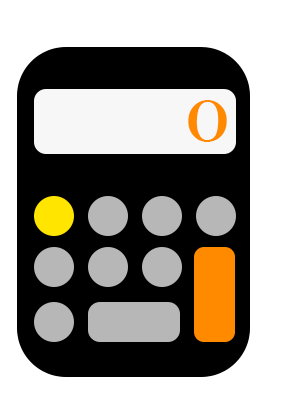
<style>
.page{position:relative;width:284px;height:412px;background:#000000}
.page>*{position:absolute;margin:0}
.t1{font:61.5px "TimesNewRomanPSMT";color:#ff8a00;scale:1.46 1}
</style>
<div class="page">
<p class="t1" style="left:188px;top:100px;width:39px;height:42px">0</p>
</div>
